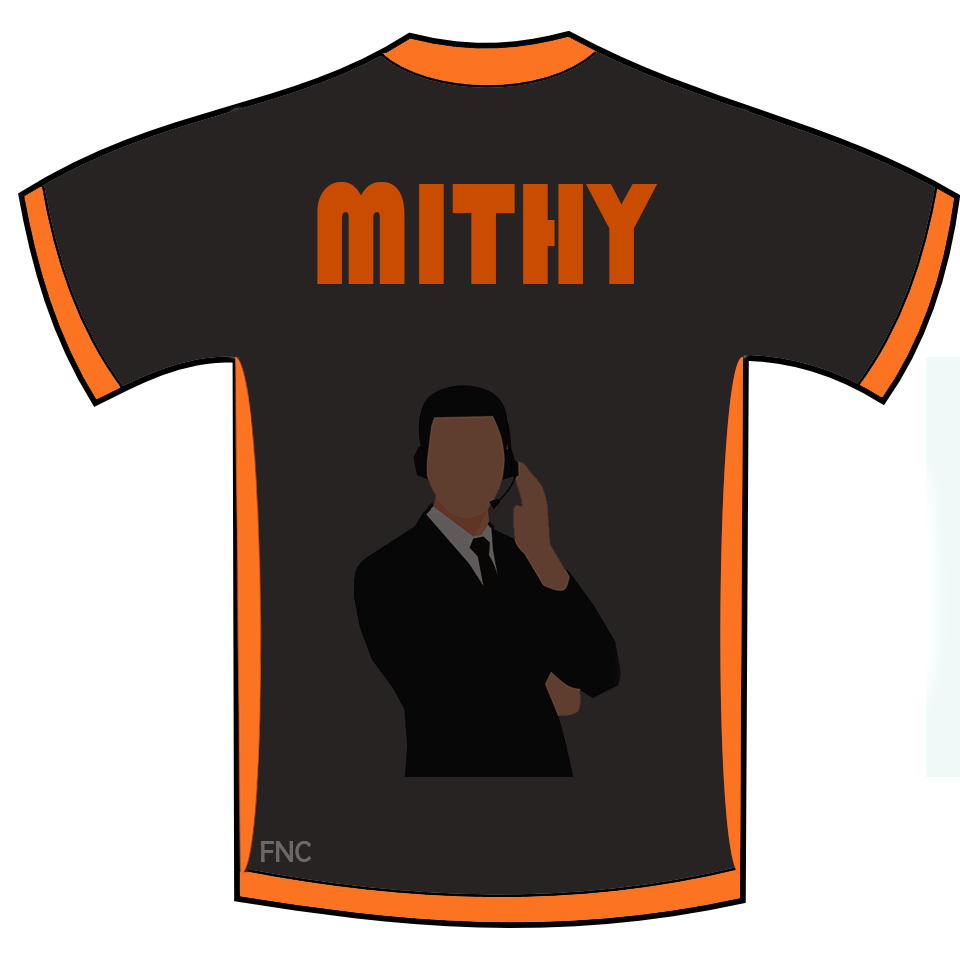
<style>
.page{position:relative;width:960px;height:960px;background:#ffffff}
.page>*{position:absolute;margin:0}
.t1{font:150.2px "Bauhaus93";color:#ca4c00;scale:0.82 1}
.t2{font:29.7px "BerlinSansFB-Reg";color:#6c6868;scale:0.94 1}
</style>
<div class="page">
<p class="t1" style="left:317px;top:182px;width:340px;height:102px">MITHY</p>
<p class="t2" style="left:261px;top:841px;width:50px;height:21px">FNC</p>
</div>
